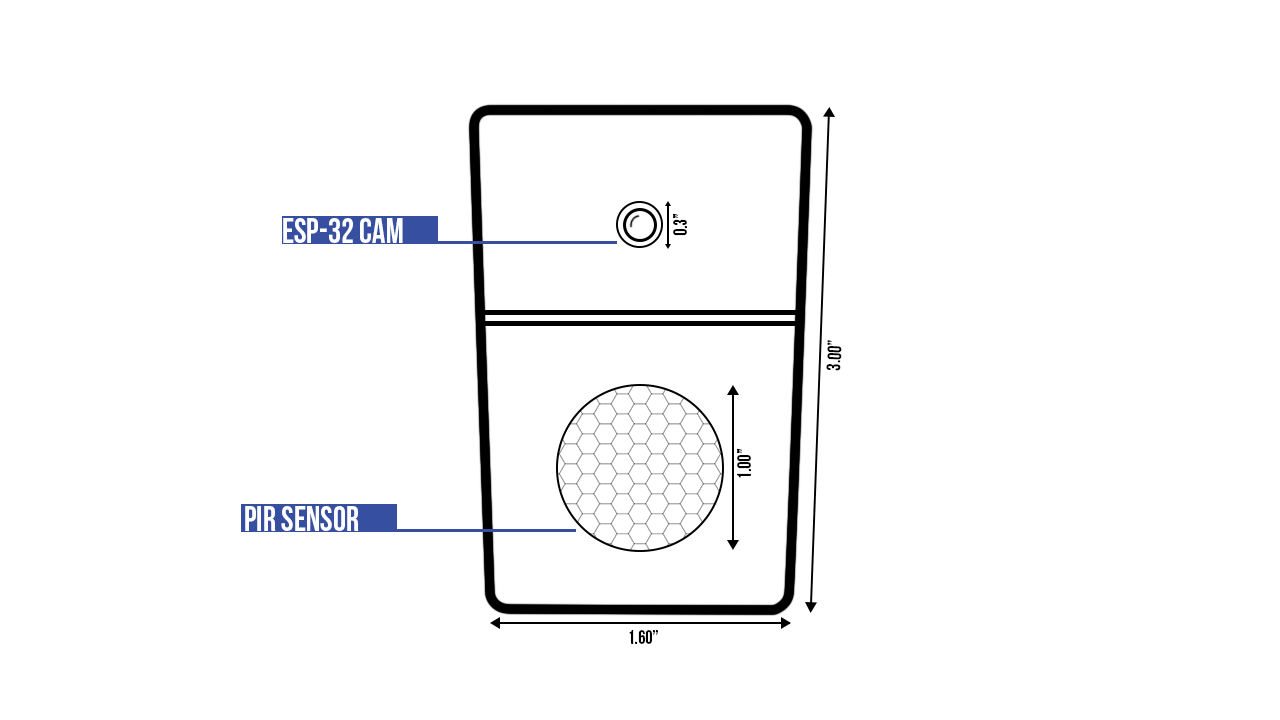
<style>
.page{position:relative;width:1280px;height:720px;background:#ffffff}
.page>*{position:absolute;margin:0}
.t1{font:36px "BebasNeue";color:#ffffff;text-transform:uppercase;scale:0.93 1}
.t2{font:19.3px "BebasNeue";color:#000000;text-transform:uppercase;scale:0.93 1}
</style>
<div class="page">
<p class="t1" style="left:283px;top:218px;width:120px;height:25px">esp-32 cam</p>
<p class="t2" style="left:673px;top:213px;width:14px;height:23px;rotate:-90deg">0.3”</p>
<p class="t2" style="left:826px;top:340px;width:16px;height:31px;rotate:-88deg">3.00”</p>
<p class="t2" style="left:737px;top:448px;width:14px;height:30px;rotate:-90deg">1.00”</p>
<p class="t1" style="left:245px;top:506px;width:114px;height:25px">pir sensor</p>
<p class="t2" style="left:629px;top:630px;width:29px;height:14px">1.60”</p>
</div>
